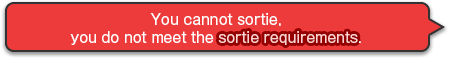
<style>
.page{position:relative;width:450px;height:58px;background:#ed3b3b}
.page>*{position:absolute;margin:0}
.t1{font:14px/18px "GothicMB101Pro-Regular";color:#ffffff}
.t2{font:14px/18px "GothicMB101Pro-Regular";color:#ffd3d3}
</style>
<div class="page">
<p class="t1" style="left:70px;top:13px;width:291px;height:32px;text-align:center">You cannot sortie,<br>you do not meet the <span class="t2">sortie requirements</span>.</p>
<p class="t1" style="left:70px;top:13px;width:291px;height:32px;text-align:center">You cannot sortie,<br>you do not meet the <span class="t2">sortie requirements</span>.</p>
</div>
